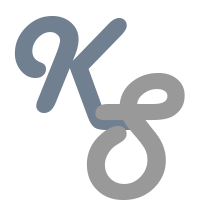
<style>
.page{position:relative;width:205px;height:224px;background:#ffffff}
.page>*{position:absolute;margin:0}
.t1{font:140px "HarlowSolid";color:#708090}
.t2{font:140px "HarlowSolid";color:#999999}
</style>
<div class="page">
<p class="t1" style="left:14px;top:16px;width:129px;height:114px">K</p>
<p class="t2" style="left:86px;top:73px;width:99px;height:127px">S</p>
</div>
